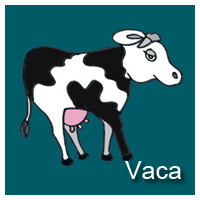
<style>
.page{position:relative;width:200px;height:200px;background:#015b66}
.page>*{position:absolute;margin:0}
.t1{font:25px "ArialMT";color:#ffffff}
</style>
<div class="page">
<p class="t1" style="left:125px;top:161px;width:56px;height:18px">Vaca</p>
</div>
